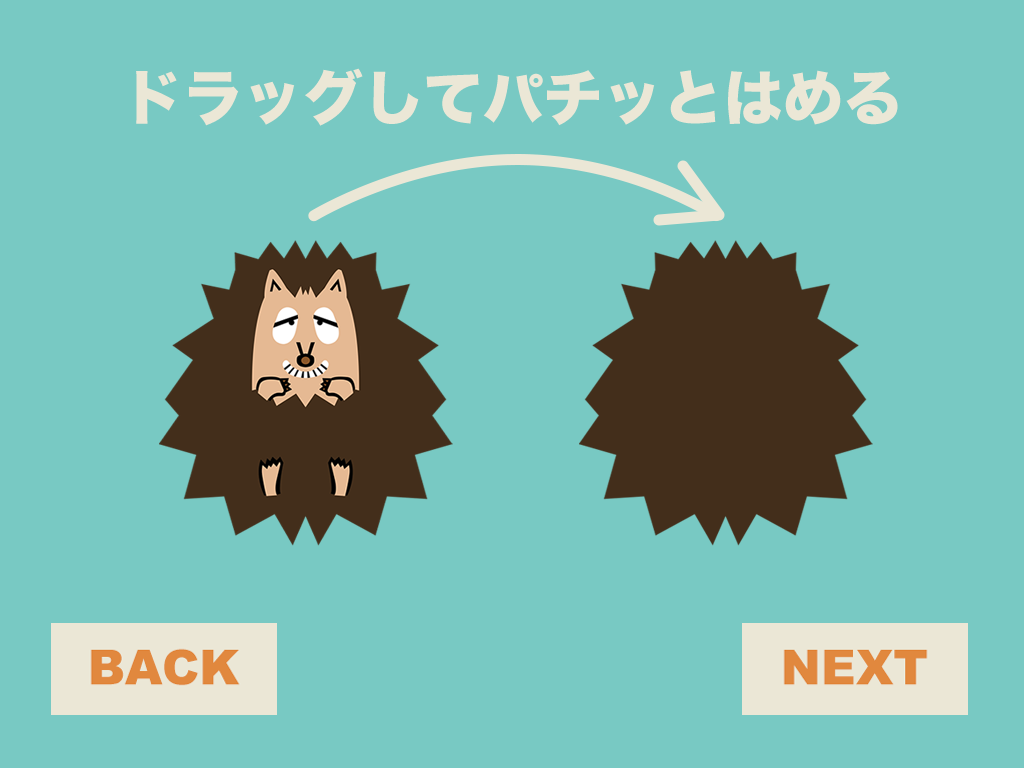
<style>
.page{position:relative;width:1024px;height:768px;background:#78c9c3}
.page>*{position:absolute;margin:0}
.t1{font:60px "HiraKakuStd-W8";color:#ebe7d6}
</style>
<div class="page">
<p class="t1" style="left:136px;top:68px;width:762px;height:58px">ドラッグしてパチッとはめる</p>
</div>
